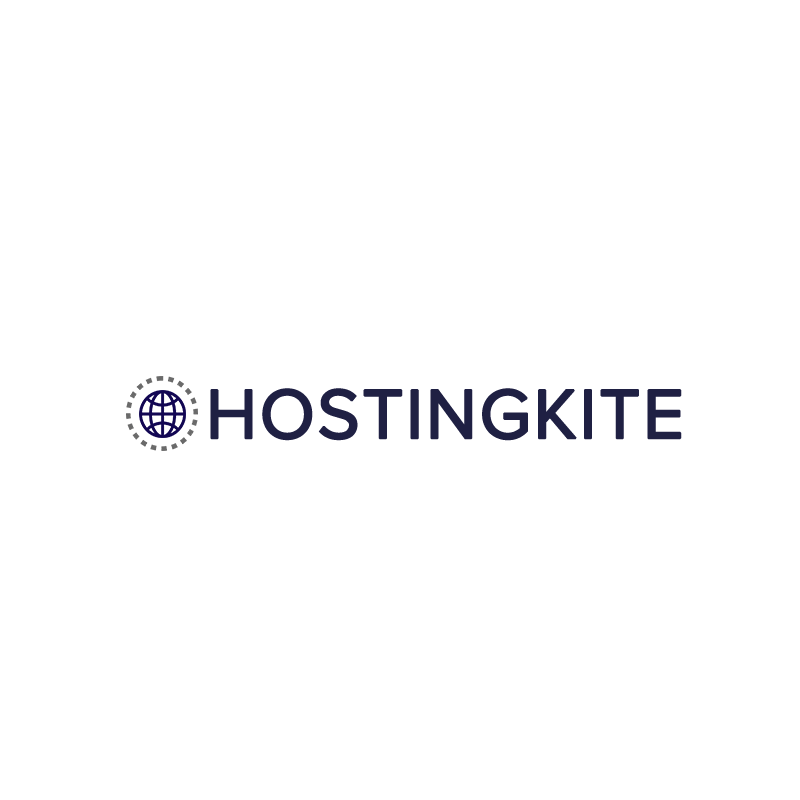
<style>
.page{position:relative;width:800px;height:800px;background:#ffffff}
.page>*{position:absolute;margin:0}
.t1{font:72px "ProximaNova-Regular";letter-spacing:0.01em;color:#1f2043;font-weight:bold}
</style>
<div class="page">
<p class="t1" style="left:210px;top:388px;width:472px;height:53px">HOSTINGKITE</p>
</div>
